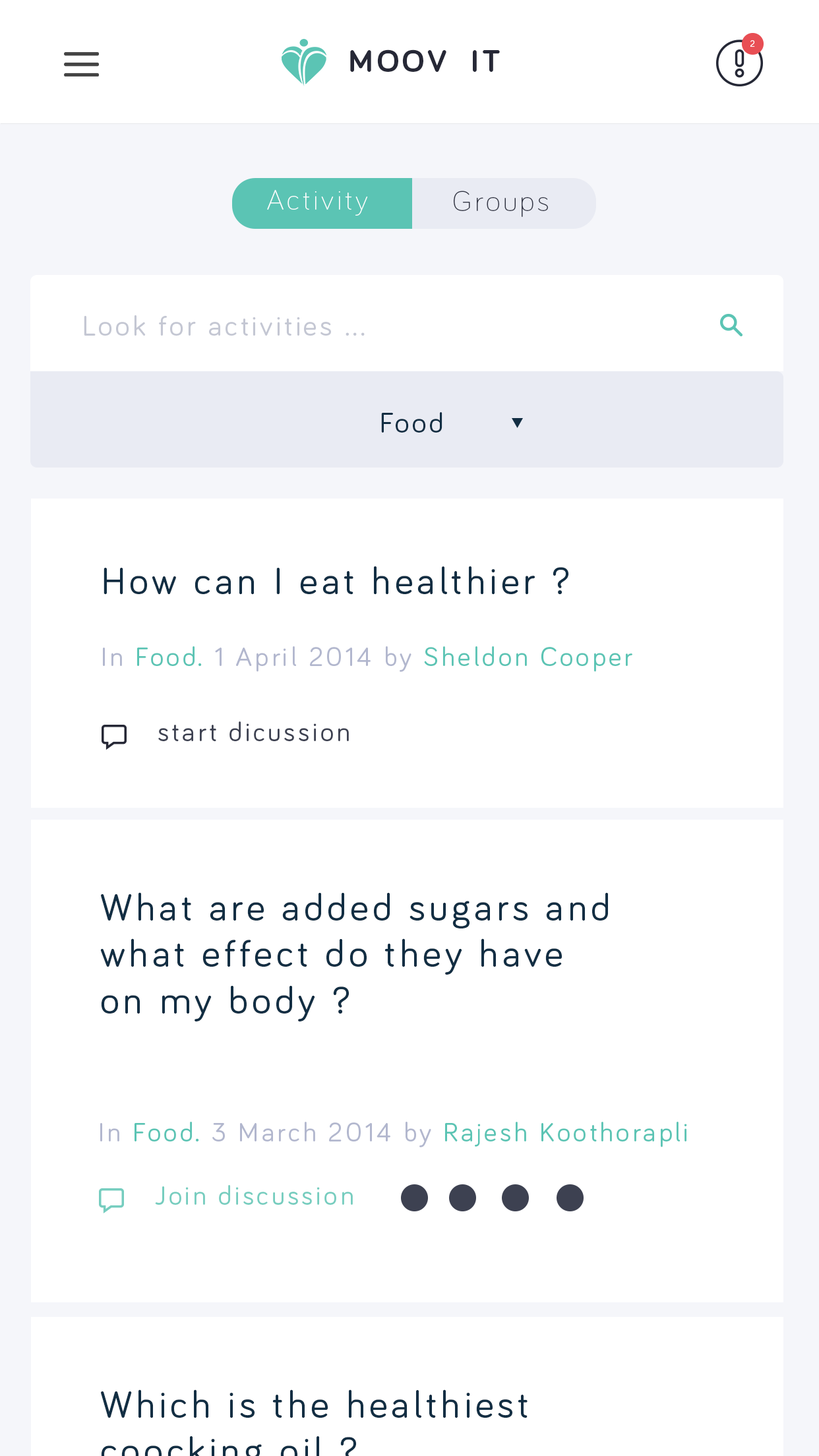
<style>
.page{position:relative;width:819px;height:1456px;background:#ffffff}
.page>*{position:absolute;margin:0}
.t1{font:31.9px "Bariol-Bold";letter-spacing:0.1em;color:#262836}
.t2{font:29px "Bariol-Light";letter-spacing:0.1em;color:#ffffff}
.t3{font:29px "Bariol-Light";letter-spacing:0.1em;color:#333645}
.t4{font:29px "Bariol-Regular";letter-spacing:0.1em;color:#c4c7d3}
.t5{font:29px "Bariol-Regular";letter-spacing:0.1em;color:#122e43}
.t6{font:38.9px "Bariol-Regular";letter-spacing:0.1em;color:#122e43}
.t7{font:27.2px "Bariol-Regular";letter-spacing:0.1em;color:#b2b7ce}
.t8{font:27.2px "Bariol-Regular";letter-spacing:0.1em;color:#5bc4b4}
.t9{font:27.2px "Bariol-Regular";letter-spacing:0.1em;color:#3d4151}
.t10{font:27.2px "Bariol-Regular";letter-spacing:0.1em;color:#76cdbf}
</style>
<div class="page">
<p class="t1" style="left:350px;top:49px;width:150px;height:23px">MOOV  IT</p>
<p class="t2" style="left:267px;top:190px;width:101px;height:26px">Activity</p>
<p class="t3" style="left:454px;top:191px;width:94px;height:26px">Groups</p>
<p class="t4" style="left:84px;top:315px;width:281px;height:21px">Look for activities ...</p>
<p class="t5" style="left:381px;top:412px;width:61px;height:21px">Food</p>
<p class="t6" style="left:104px;top:566px;width:464px;height:28px">How can I eat healthier ?</p>
<p class="t7" style="left:103px;top:646px;width:529px;height:26px">In <span class="t8">Food. </span>1 April 2014 by <span class="t8">Sheldon Cooper</span></p>
<p class="t9" style="left:158px;top:721px;width:191px;height:20px">start dicussion</p>
<p class="t6" style="left:100px;top:892px;width:508px;height:129px">What are added sugars and <br>what effect do they have <br>on my body ?</p>
<p class="t8" style="left:100px;top:1122px;width:587px;height:25px"><span class="t7">In </span>Food. <span class="t7">3 March 2014 by </span>Rajesh Koothorapli</p>
<p class="t10" style="left:155px;top:1185px;width:198px;height:20px">Join discussion</p>
</div>
